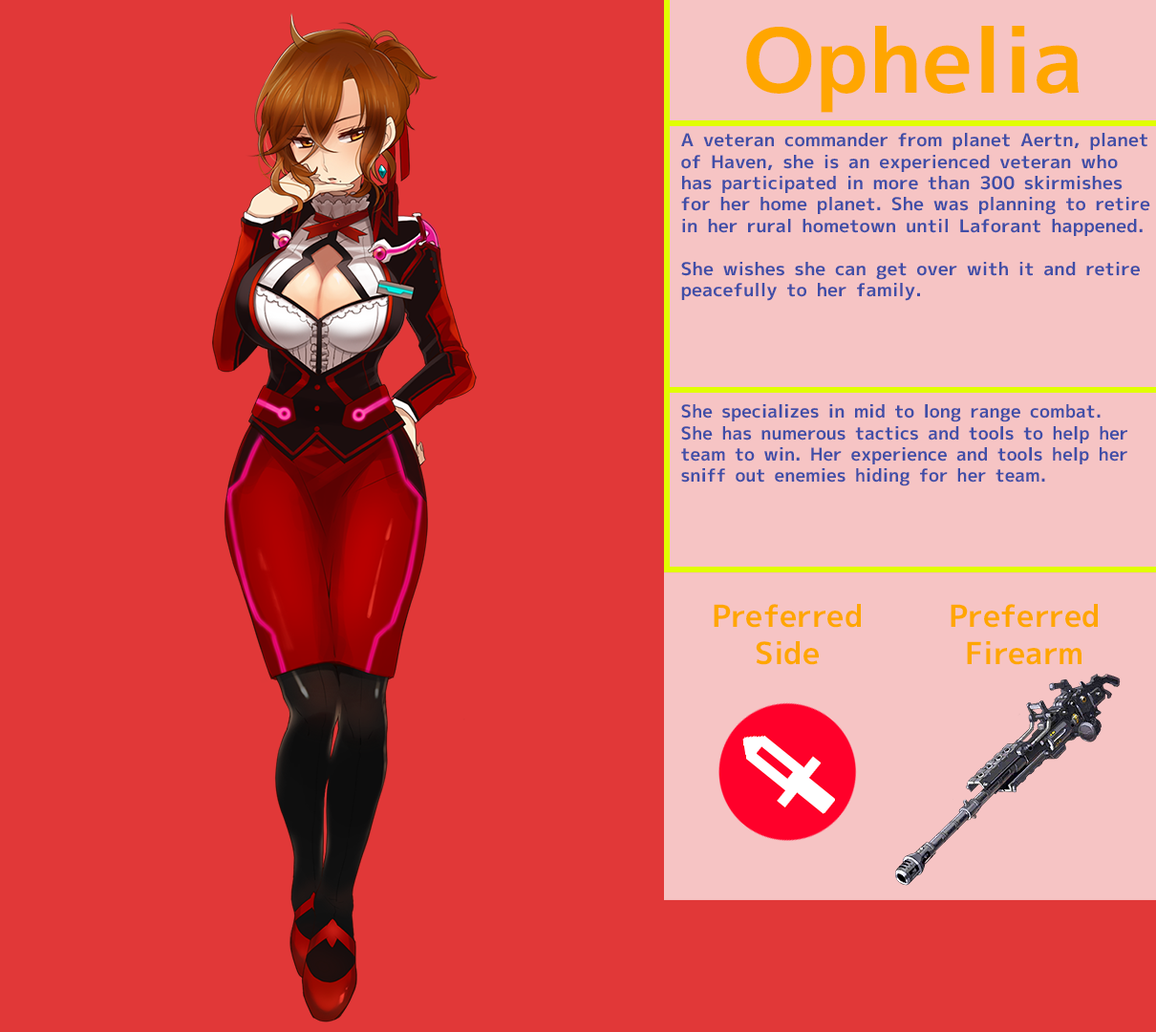
<style>
.page{position:relative;width:1156px;height:1032px;background:#e13838}
.page>*{position:absolute;margin:0}
.t1{font:89.2px "MigMix-2P-Bold";color:#ffa600}
.t2{font:17.8px "MigMix-2P-Bold";color:#404ea7;scale:1.03 1}
.t3{font:17.8px "MigMix-2P-Bold";color:#404ea7}
.t4{font:30.6px "MigMix-2P-Bold";color:#ffa600}
</style>
<div class="page">
<p class="t1" style="left:746px;top:26px;width:333px;height:87px">Ophelia</p>
<p class="t2" style="left:681px;top:133px;width:469px;height:168px">A veteran commander from planet Aertn, planet of Haven,  she is an experienced veteran who has participated in more than 300 skirmishes for her home planet. She was planning to retire<br>in her rural hometown until Laforant happened.<br><br>She wishes she can get over with it and retire peacefully to her family.</p>
<p class="t3" style="left:681px;top:404px;width:446px;height:82px">She specializes in mid to long range combat. She has numerous tactics and tools to help her team to win. Her experience and tools help her<br>sniff out enemies hiding for her team.</p>
<p class="t4" style="left:714px;top:604px;width:147px;height:61px;text-align:center">Preferred<br>Side</p>
<p class="t4" style="left:950px;top:604px;width:148px;height:61px;text-align:center">Preferred<br>Firearm</p>
</div>
